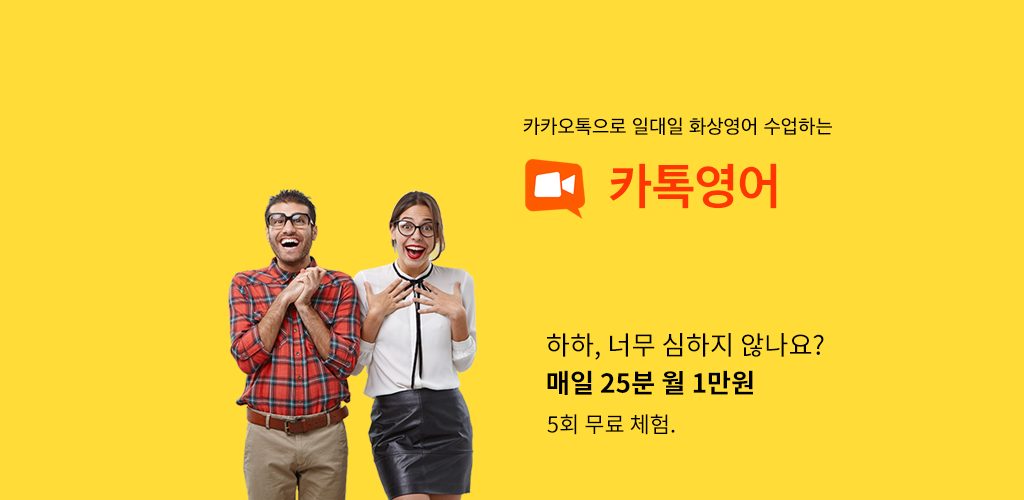
<style>
.page{position:relative;width:1024px;height:500px;background:#ffdc38}
.page>*{position:absolute;margin:0}
.t1{font:20px "AppleSDGothicNeo-Medium";color:#000000}
.t2{font:49.9px "AppleSDGothicNeo-Bold";color:#ff3600}
.t3{font:26.3px/38px "SourceHanSansKR-Regular";color:#000000}
.t4{font:26.3px/38px "SourceHanSansKR-Bold";color:#000000}
.t5{font:22px "SourceHanSansKR-Regular";color:#000000}
</style>
<div class="page">
<p class="t1" style="left:523px;top:117px;width:309px;height:18px">카카오톡으로 일대일 화상영어 수업하는</p>
<p class="t2" style="left:609px;top:163px;width:168px;height:46px">카톡영어</p>
<p class="t3" style="left:547px;top:333px;width:277px;height:62px">하하, 너무 심하지 않나요?<br><span class="t4">매일 25분 월 1만원</span></p>
<p class="t5" style="left:547px;top:414px;width:128px;height:21px">5회 무료 체험.</p>
</div>
